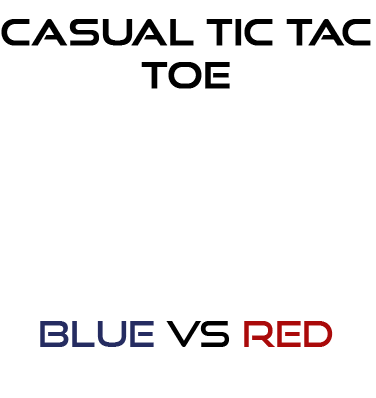
<style>
.page{position:relative;width:376px;height:398px;background:#ffffff}
.page>*{position:absolute;margin:0}
.t1{font:36px "GoodTimesRg-Regular";color:#000000;font-weight:bold}
.t2{font:36px "GoodTimesRg-Regular";color:#252c61}
.t3{font:36px "GoodTimesRg-Regular";color:#000000}
.t4{font:36px "GoodTimesRg-Regular";color:#aa0a0a}
</style>
<div class="page">
<p class="t1" style="left:1px;top:19px;width:370px;height:328px;text-align:center">CASUAL TIC TAC TOE<br><br><br><br><br><br><span class="t2">BLUE </span><span class="t3">VS </span><span class="t4">RED</span></p>
</div>
